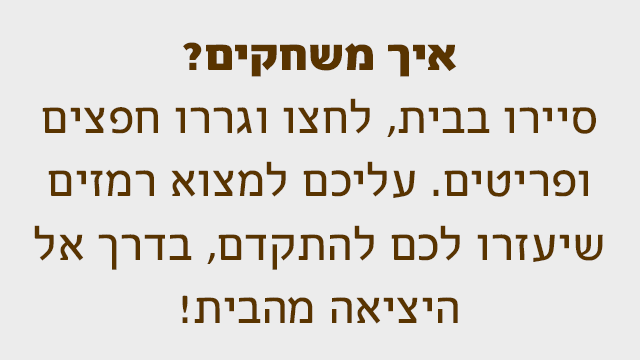
<style>
.page{position:relative;width:640px;height:360px;background:#ececec}
.page>*{position:absolute;margin:0}
.t1{font:52.7px "FbAlbatros-Regular";color:#593400}
.t2{font:52.7px/33.6px "FbAlbatros-Black";color:#593400}
</style>
<div class="page">
<p class="t1" style="left:34px;top:42px;width:569px;height:282px;text-align:center"><span class="t2">איך משחקים?<br></span>סיירו בבית, לחצו וגררו חפצים ופריטים. עליכם למצוא רמזים שיעזרו לכם להתקדם, בדרך אל היציאה מהבית!</p>
</div>
